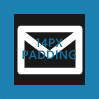
<style>
.page{position:relative;width:99px;height:99px;background:#1c80b0}
.page>*{position:absolute;margin:0}
.t1{font:12px/12px "SegoeWP-Semibold";letter-spacing:0.025em;color:#1372a0;text-transform:uppercase}
</style>
<div class="page">
<p class="t1" style="left:22px;top:38px;width:54px;height:22px;text-align:center">14px<br>padding</p>
</div>
